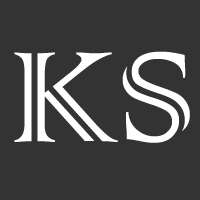
<style>
.page{position:relative;width:200px;height:200px;background:#333333}
.page>*{position:absolute;margin:0}
.t1{font:170px "ColonnaMT";color:#ffffff}
</style>
<div class="page">
<p class="t1" style="left:14px;top:51px;width:176px;height:92px">KS</p>
</div>
